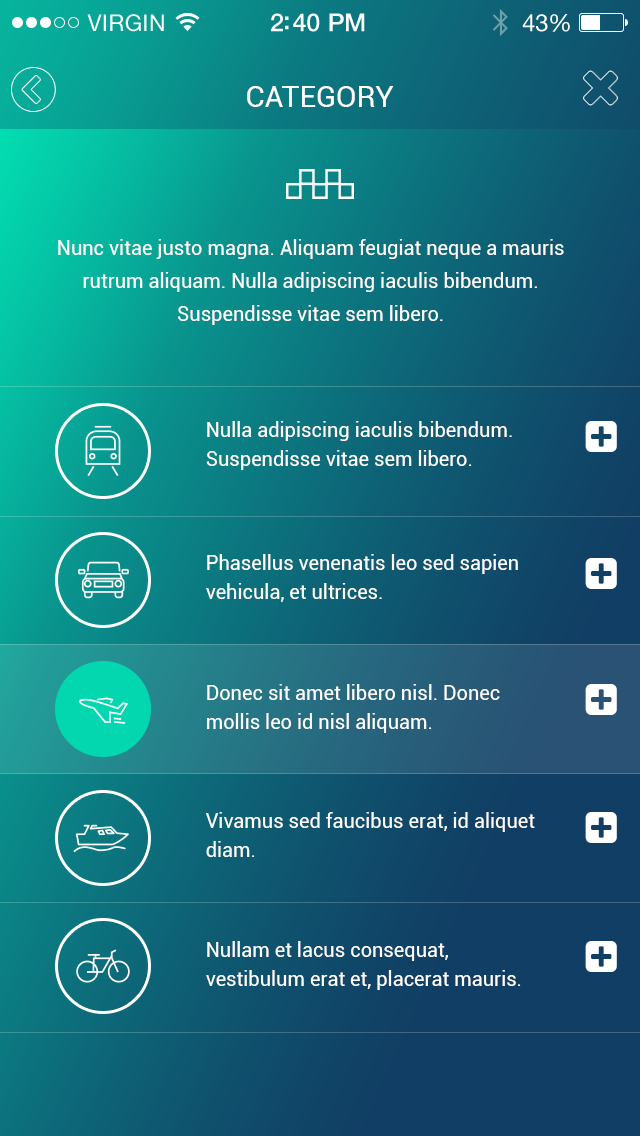
<style>
.page{position:relative;width:640px;height:1136px}
.page>*{position:absolute;margin:0}
.t1{font:30px "Roboto-Regular";color:#ffffff;text-transform:uppercase}
.t2{font:20px/33px "Roboto-Regular";color:#ffffff}
.t3{font:20px/29px "Roboto-Regular";color:#ffffff}
</style>
<div class="page">
<p class="t1" style="left:247px;top:86px;width:147px;height:21px">Category</p>
<p class="t2" style="left:58px;top:239px;width:506px;height:86px;text-align:center">Nunc vitae justo magna. Aliquam feugiat neque a mauris rutrum aliquam. Nulla adipiscing iaculis bibendum. Suspendisse vitae sem libero.</p>
<p class="t3" style="left:206px;top:421px;width:306px;height:49px">Nulla adipiscing iaculis bibendum. <br>Suspendisse vitae sem libero.</p>
<p class="t3" style="left:206px;top:554px;width:312px;height:48px">Phasellus venenatis leo sed sapien vehicula, et ultrices.</p>
<p class="t3" style="left:207px;top:684px;width:293px;height:49px">Donec sit amet libero nisl. Donec <br>mollis leo id nisl aliquam.</p>
<p class="t3" style="left:206px;top:812px;width:329px;height:45px">Vivamus sed faucibus erat, id aliquet diam.</p>
<p class="t3" style="left:206px;top:941px;width:315px;height:49px">Nullam et lacus consequat, <br>vestibulum erat et, placerat mauris.</p>
</div>
